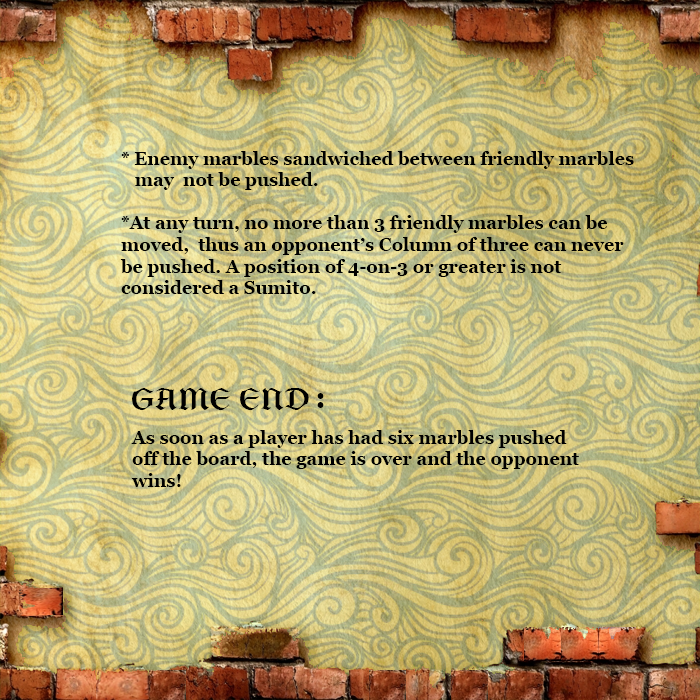
<style>
.page{position:relative;width:700px;height:700px}
.page>*{position:absolute;margin:0}
.t1{font:18px "Georgia-Bold";color:#000000}
.t2{font:30px "Mathematica6-Bold";color:#000000}
.t3{font:30px "Georgia-Bold";color:#000000}
</style>
<div class="page">
<p class="t1" style="left:120px;top:151px;width:514px;height:143px">* Enemy marbles sandwiched between friendly marbles         may  not be pushed.<br><br>    *At any turn, no more than 3 friendly marbles can be       moved,  thus an opponent’s Column of three can never      be pushed. A position of 4-on-3 or greater is not        considered a Sumito.</p>
<p class="t2" style="left:132px;top:388px;width:177px;height:22px">GAME END</p>
<p class="t3" style="left:317px;top:393px;width:7px;height:15px">:</p>
<p class="t1" style="left:131px;top:430px;width:448px;height:57px">As soon as a player has had six marbles pushed off the board, the game is over and the opponent wins!</p>
</div>
